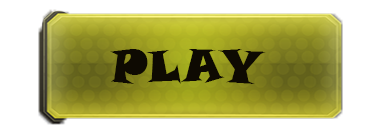
<style>
.page{position:relative;width:380px;height:125px;background:#ffffff}
.page>*{position:absolute;margin:0}
.t1{font:45.8px "SnapITC-Regular";color:#0e0a02}
</style>
<div class="page">
<p class="t1" style="left:110px;top:49px;width:156px;height:35px">PLAY</p>
</div>
